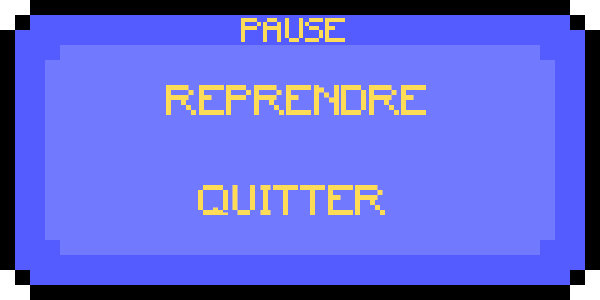
<style>
.page{position:relative;width:600px;height:300px;background:#7179ff}
.page>*{position:absolute;margin:0}
.t1{font:32px "Minecraft";color:#ffdc57}
.t2{font:40px "Minecraft";color:#ffdc57}
</style>
<div class="page">
<p class="t1" style="left:241px;top:18px;width:104px;height:24px">PAUSE</p>
<p class="t2" style="left:166px;top:85px;width:260px;height:30px">REPRENDRE</p>
<p class="t2" style="left:198px;top:185px;width:187px;height:30px">QUITTER</p>
</div>
